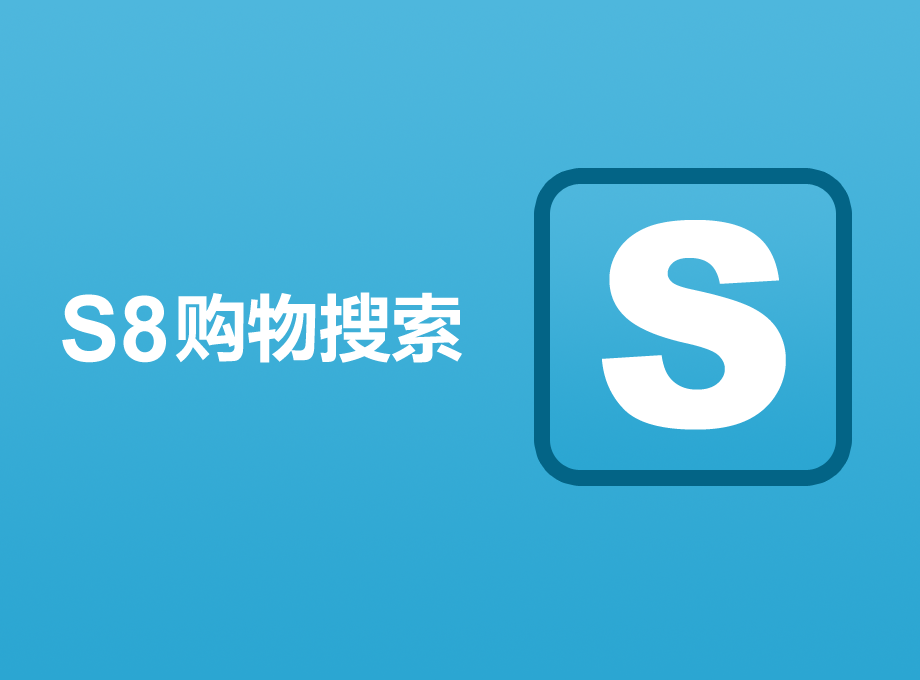
<style>
.page{position:relative;width:920px;height:680px}
.page>*{position:absolute;margin:0}
.t1{font:283px "Arial-Black";color:#ffffff;text-transform:uppercase}
.t2{font:91px "Arial-BoldMT";color:#ffffff}
.t3{font:72px "MicrosoftYaHei-Bold";color:#ffffff}
</style>
<div class="page">
<p class="t1" style="left:602px;top:220px;width:184px;height:210px">S</p>
<p class="t2" style="left:62px;top:294px;width:104px;height:69px">S8</p>
<p class="t3" style="left:175px;top:292px;width:287px;height:71px">购物搜索</p>
</div>
